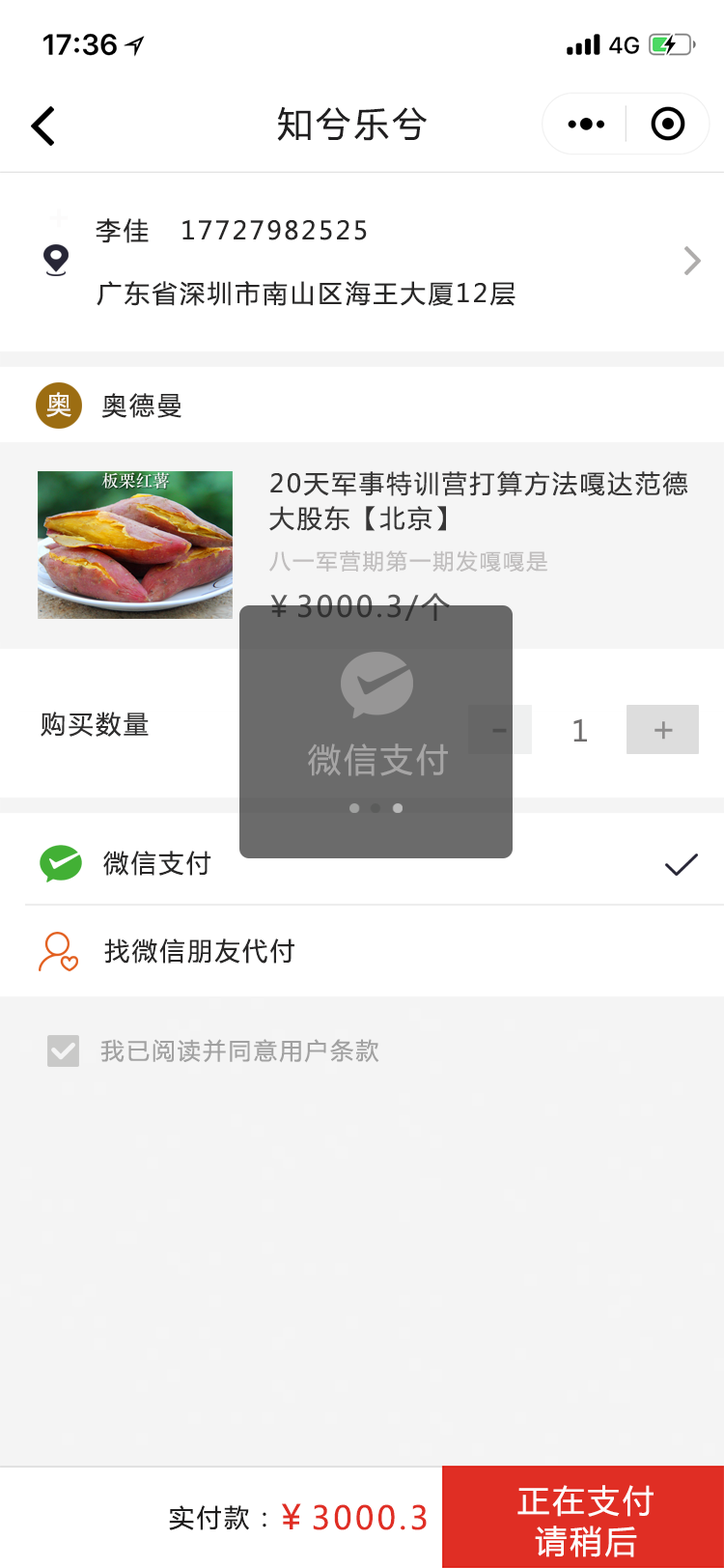
<style>
.page{position:relative;width:724px;height:1568px;background:#ffffff}
.page>*{position:absolute;margin:0}
.t1{font:34.8px "MicrosoftYaHei";letter-spacing:0.1em;color:#201f20}
.t2{font:25.1px "MicrosoftYaHei";letter-spacing:0.1em;color:#282727}
.t3{font:25.1px "MicrosoftYaHei";letter-spacing:0.1em;color:#f9f7f2}
.t4{font:25.1px/34.8px "MicrosoftYaHei";letter-spacing:0.1em;color:#373636}
.t5{font:21.2px "MicrosoftYaHei";letter-spacing:0.1em;color:#c0bebe}
.t6{font:29px "MicrosoftYaHei";letter-spacing:0.1em}
.t7{font:25.1px "MicrosoftYaHei";letter-spacing:0.1em;color:#2f2e2e}
.t8{font:29px "MicrosoftYaHei";letter-spacing:0.1em;color:#6f6d6d}
.t9{font:34.8px "MicrosoftYaHei";letter-spacing:0.1em;color:#8e8d8d}
.t10{font:46.3px "MicrosoftYaHei";letter-spacing:0.1em;color:#4e4e4e}
.t11{font:32.8px "MicrosoftYaHei";letter-spacing:0.1em;color:#a6a5a5}
.t12{font:23.2px "MicrosoftYaHei";letter-spacing:0.1em;color:#a1a1a1}
.t13{font:31.9px "MicrosoftYaHei";letter-spacing:0.1em;color:#fdfbfb}
.t14{font:25.1px "MicrosoftYaHei";letter-spacing:0.1em;color:#1e1d1d}
.t15{font:31.9px "MicrosoftYaHei";letter-spacing:0.1em;color:#e02e24}
.t16{font:33.8px "MicrosoftYaHei";letter-spacing:0.1em;color:#e02e24}
</style>
<div class="page">
<p class="t1" style="left:277px;top:106px;width:150px;height:35px">知兮乐兮</p>
<p class="t2" style="left:96px;top:218px;width:271px;height:25px">李佳   17727982525</p>
<p class="t2" style="left:97px;top:281px;width:419px;height:25px">广东省深圳市南山区海王大厦12层</p>
<p class="t3" style="left:46px;top:392px;width:25px;height:25px">奥</p>
<p class="t2" style="left:101px;top:393px;width:81px;height:25px">奥德曼</p>
<p class="t4" style="left:269px;top:471px;width:419px;height:60px">20天军事特训营打算方法嘎达范德<br>大股东【北京】</p>
<p class="t5" style="left:269px;top:550px;width:279px;height:23px">八一军营期第一期发嘎嘎是</p>
<p class="t6" style="left:270px;top:593px;width:180px;height:28px">￥3000.3/个</p>
<p class="t7" style="left:41px;top:712px;width:108px;height:25px">购买数量</p>
<p class="t8" style="left:574px;top:718px;width:13px;height:24px">1</p>
<p class="t9" style="left:655px;top:721px;width:18px;height:19px">+</p>
<p class="t10" style="left:492px;top:728px;width:15px;height:5px">-</p>
<p class="t11" style="left:308px;top:743px;width:140px;height:33px">微信支付</p>
<p class="t2" style="left:103px;top:851px;width:108px;height:25px">微信支付</p>
<p class="t2" style="left:104px;top:938px;width:190px;height:26px">找微信朋友代付</p>
<p class="t12" style="left:100px;top:1039px;width:279px;height:24px">我已阅读并同意用户条款</p>
<p class="t13" style="left:518px;top:1485px;width:136px;height:32px">正在支付</p>
<p class="t14" style="left:169px;top:1505px;width:97px;height:25px">实付款：</p>
<p class="t15" style="left:282px;top:1503px;width:145px;height:27px"><span class="t16">￥</span>3000.3</p>
<p class="t13" style="left:535px;top:1526px;width:102px;height:31px">请稍后</p>
</div>
